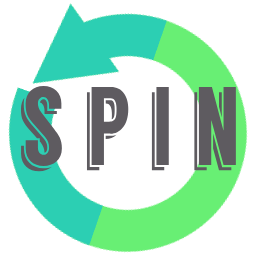
<style>
.page{position:relative;width:256px;height:256px;background:#ffffff}
.page>*{position:absolute;margin:0}
.t1{font:111.5px "Langdon";letter-spacing:0.18em;color:#5e5b60;scale:0.88 1}
</style>
<div class="page">
<p class="t1" style="left:20px;top:85px;width:216px;height:87px">spin</p>
</div>
